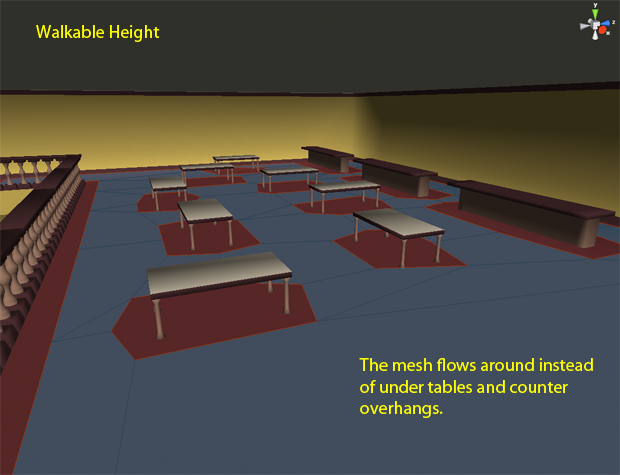
<style>
.page{position:relative;width:620px;height:475px;background:#414c5d}
.page>*{position:absolute;margin:0}
.t1{font:18px "MyriadPro-Regular";color:#ffff00}
</style>
<div class="page">
<p class="t1" style="left:36px;top:25px;width:124px;height:17px">Walkable Height</p>
<p class="t1" style="left:359px;top:358px;width:234px;height:60px">The mesh flows around instead<br>of under tables and counter<br>overhangs.</p>
</div>
